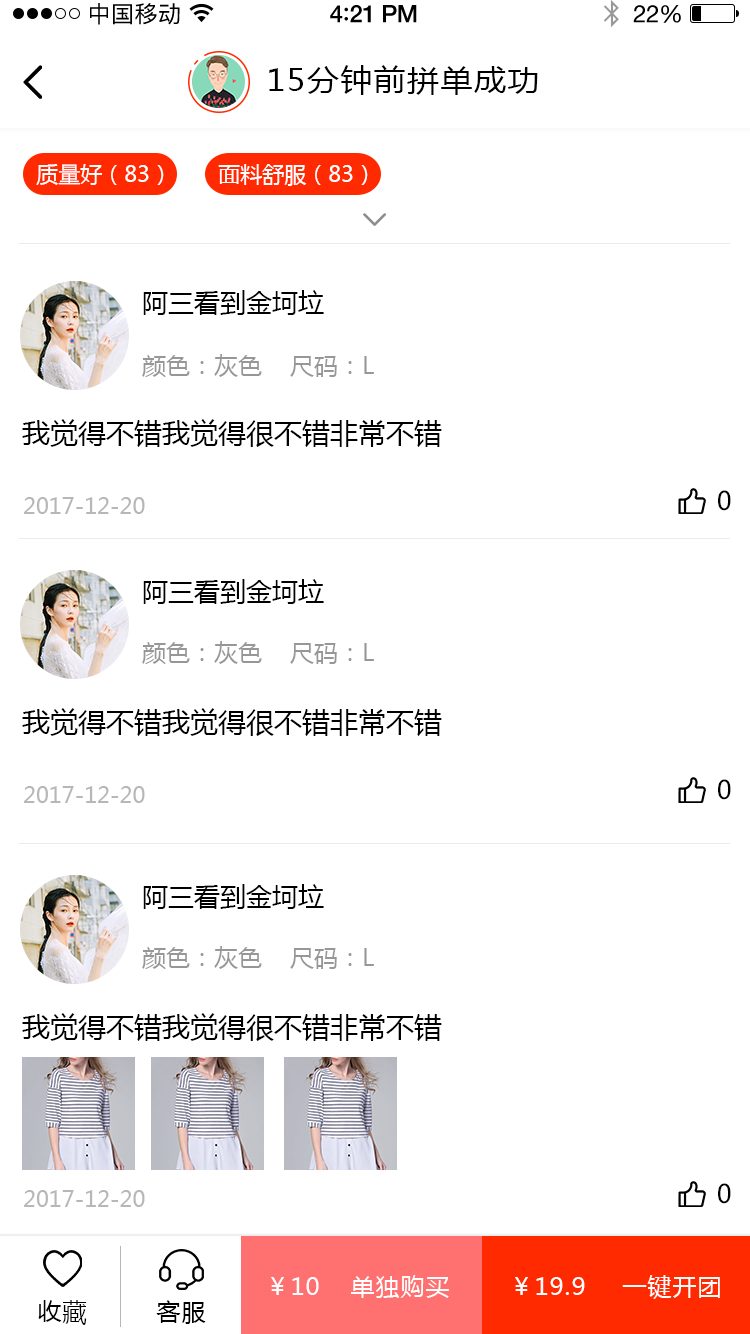
<style>
.page{position:relative;width:750px;height:1334px;background:#ffffff}
.page>*{position:absolute;margin:0}
.t1{font:23px "PingFangSC-Regular";letter-spacing:0.02em;color:#000000}
.t2{font:24px "HelveticaNeue-Medium";letter-spacing:-0.02em;color:#000000}
.t3{font:26px "Avenir-Medium";letter-spacing:-0.02em;color:#000000}
.t4{font:24px "HelveticaNeue";letter-spacing:-0.02em;color:#000000}
.t5{font:30px "MicrosoftYaHei";letter-spacing:0.05em;color:#000000;scale:1.06 1}
.t6{font:22px "MicrosoftYaHei";color:#ffffff}
.t7{font:26px "MicrosoftYaHei";color:#000000}
.t8{font:24px "MicrosoftYaHei";color:#979797}
.t9{font:28px "MicrosoftYaHei";color:#000000}
.t10{font:22px "MicrosoftYaHei";color:#b7b7b7}
.t11{font:25.4px "MicrosoftYaHei";color:#000000}
.t12{font:24px "MicrosoftYaHei";letter-spacing:0.04em;color:#ffffff}
.t13{font:24px "MicrosoftYaHei";letter-spacing:0.04em;color:#000000}
</style>
<div class="page">
<p class="t1" style="left:90px;top:3px;width:90px;height:22px">中国移动</p>
<p class="t2" style="left:330px;top:5px;width:87px;height:18px">4<span class="t3">:</span>21 PM</p>
<p class="t4" style="left:633px;top:5px;width:48px;height:18px">22%</p>
<p class="t5" style="left:269px;top:65px;width:269px;height:30px">15分钟前拼单成功</p>
<p class="t6" style="left:36px;top:164px;width:128px;height:21px">质量好（83）</p>
<p class="t6" style="left:218px;top:164px;width:150px;height:22px">面料舒服（83）</p>
<p class="t7" style="left:143px;top:290px;width:181px;height:25px">阿三看到金坷垃</p>
<p class="t8" style="left:142px;top:354px;width:232px;height:23px">颜色：灰色    尺码：L</p>
<p class="t9" style="left:22px;top:419px;width:420px;height:28px">我觉得不错我觉得很不错非常不错</p>
<p class="t10" style="left:24px;top:497px;width:121px;height:17px">2017-12-20</p>
<p class="t11" style="left:718px;top:490px;width:13px;height:21px">0</p>
<p class="t7" style="left:143px;top:579px;width:181px;height:25px">阿三看到金坷垃</p>
<p class="t8" style="left:142px;top:641px;width:232px;height:23px">颜色：灰色    尺码：L</p>
<p class="t9" style="left:22px;top:708px;width:420px;height:28px">我觉得不错我觉得很不错非常不错</p>
<p class="t11" style="left:718px;top:779px;width:13px;height:21px">0</p>
<p class="t10" style="left:24px;top:786px;width:121px;height:17px">2017-12-20</p>
<p class="t7" style="left:143px;top:884px;width:181px;height:25px">阿三看到金坷垃</p>
<p class="t8" style="left:142px;top:946px;width:232px;height:23px">颜色：灰色    尺码：L</p>
<p class="t9" style="left:22px;top:1013px;width:420px;height:28px">我觉得不错我觉得很不错非常不错</p>
<p class="t10" style="left:24px;top:1190px;width:121px;height:17px">2017-12-20</p>
<p class="t11" style="left:718px;top:1183px;width:13px;height:21px">0</p>
<p class="t12" style="left:271px;top:1277px;width:48px;height:18px">￥10</p>
<p class="t12" style="left:351px;top:1275px;width:98px;height:23px">单独购买</p>
<p class="t12" style="left:515px;top:1277px;width:70px;height:18px">￥19.9</p>
<p class="t12" style="left:622px;top:1275px;width:98px;height:24px">一键开团</p>
<p class="t13" style="left:38px;top:1300px;width:49px;height:25px">收藏</p>
<p class="t13" style="left:156px;top:1300px;width:50px;height:24px">客服</p>
</div>
